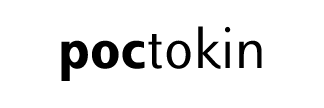
<style>
.page{position:relative;width:324px;height:108px;background:#ffffff}
.page>*{position:absolute;margin:0}
.t1{font:61.9px "LuissSans-Regular";color:#000000;scale:1.03 1}
.t2{font:61.9px "LuissSans-Bold";color:#000000;scale:1.03 1}
</style>
<div class="page">
<p class="t1" style="left:61px;top:26px;width:201px;height:56px"><span class="t2">poc</span>tokin</p>
</div>
